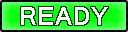
<style>
.page{position:relative;width:128px;height:32px}
.page>*{position:absolute;margin:0}
.t1{font:24px "Kartika-Bold";color:#ffffff}
</style>
<div class="page">
<p class="t1" style="left:21px;top:7px;width:87px;height:18px">READY</p>
</div>
